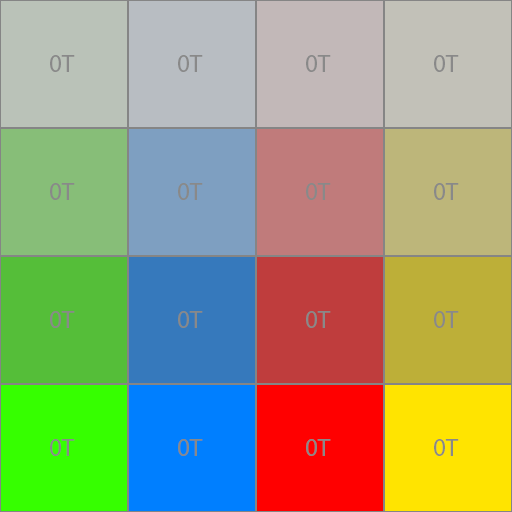
<style>
.page{position:relative;width:512px;height:512px}
.page>*{position:absolute;margin:0}
.t1{font:25px "MyriadPro-Regular";color:#898989}
</style>
<div class="page">
<p class="t1" style="left:50px;top:55px;width:25px;height:17px">0T</p>
<p class="t1" style="left:178px;top:55px;width:25px;height:17px">0T</p>
<p class="t1" style="left:306px;top:55px;width:25px;height:17px">0T</p>
<p class="t1" style="left:434px;top:55px;width:25px;height:17px">0T</p>
<p class="t1" style="left:50px;top:183px;width:25px;height:17px">0T</p>
<p class="t1" style="left:178px;top:183px;width:25px;height:17px">0T</p>
<p class="t1" style="left:306px;top:183px;width:25px;height:17px">0T</p>
<p class="t1" style="left:434px;top:183px;width:25px;height:17px">0T</p>
<p class="t1" style="left:50px;top:311px;width:25px;height:17px">0T</p>
<p class="t1" style="left:178px;top:311px;width:25px;height:17px">0T</p>
<p class="t1" style="left:306px;top:311px;width:25px;height:17px">0T</p>
<p class="t1" style="left:434px;top:311px;width:25px;height:17px">0T</p>
<p class="t1" style="left:50px;top:439px;width:25px;height:17px">0T</p>
<p class="t1" style="left:178px;top:439px;width:25px;height:17px">0T</p>
<p class="t1" style="left:306px;top:439px;width:25px;height:17px">0T</p>
<p class="t1" style="left:434px;top:439px;width:25px;height:17px">0T</p>
</div>
